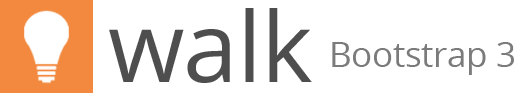
<style>
.page{position:relative;width:531px;height:93px;background:#ffffff}
.page>*{position:absolute;margin:0}
.t1{font:97.5px "OpenSans";letter-spacing:-0.01em;color:#4e4e4e}
.t2{font:35px "OpenSans";letter-spacing:-0.01em;color:#7b7b7b}
</style>
<div class="page">
<p class="t1" style="left:109px;top:8px;width:203px;height:75px">walk</p>
<p class="t2" style="left:332px;top:42px;width:182px;height:33px">Bootstrap 3</p>
</div>
